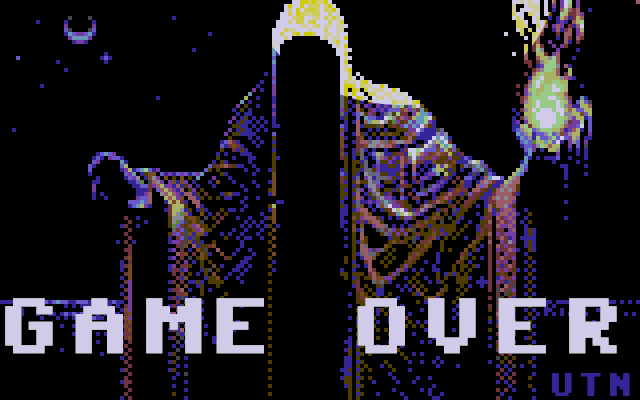
<style>
.page{position:relative;width:640px;height:400px;background:#000000}
.page>*{position:absolute;margin:0}
.t1{font:80px "Commodore-64-Pixelized";letter-spacing:0.1em;color:#cfcbe8;text-transform:uppercase}
.t2{font:33px "Commodore-64-Pixelized";letter-spacing:0.1em;color:#4030a5;text-transform:uppercase}
</style>
<div class="page">
<p class="t1" style="left:5px;top:298px;width:612px;height:56px">game over</p>
<p class="t1" style="left:5px;top:298px;width:612px;height:56px">game over</p>
<p class="t1" style="left:5px;top:298px;width:612px;height:56px">game over</p>
<p class="t1" style="left:5px;top:298px;width:612px;height:56px">game over</p>
<p class="t1" style="left:5px;top:298px;width:612px;height:56px">game over</p>
<p class="t2" style="left:552px;top:373px;width:78px;height:23px">utn</p>
</div>
